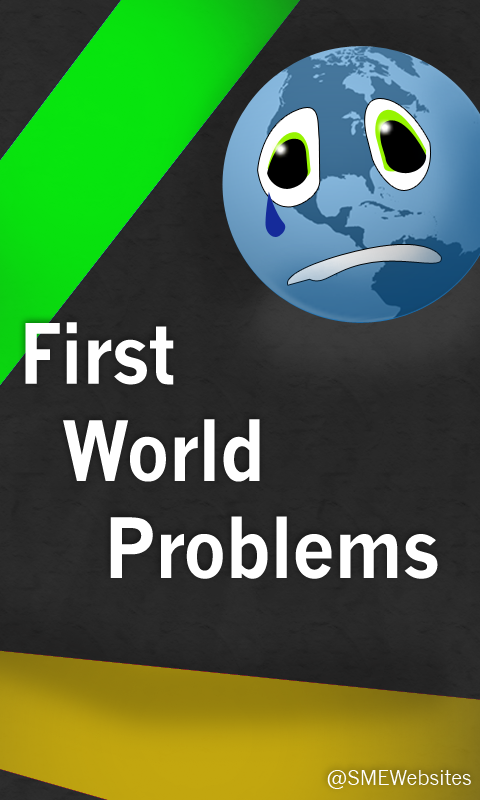
<style>
.page{position:relative;width:480px;height:800px}
.page>*{position:absolute;margin:0}
.t1{font:81px "NewsGothic-Bold";letter-spacing:-0.005em;color:#fefefe;scale:0.91 1}
.t2{font:20px "NewsGothic";color:#ffffff}
</style>
<div class="page">
<p class="t1" style="left:25px;top:322px;width:413px;height:257px">First<br>  World<br>    Problems</p>
<p class="t2" style="left:327px;top:770px;width:144px;height:19px">@SMEWebsites</p>
</div>
